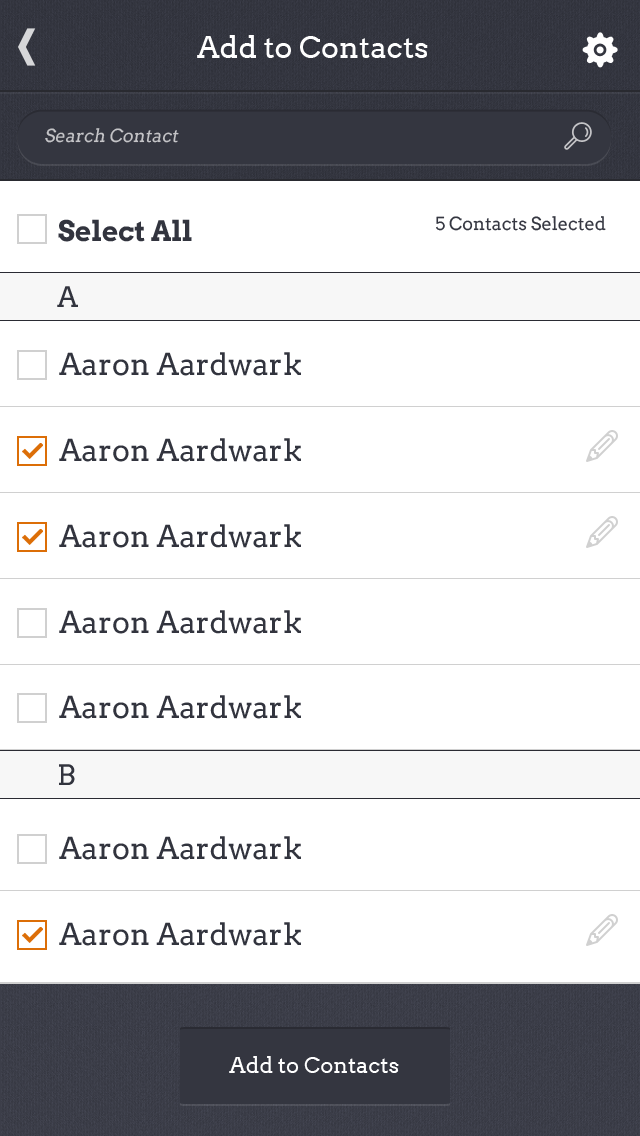
<style>
.page{position:relative;width:640px;height:1136px;background:#ffffff}
.page>*{position:absolute;margin:0}
.t1{font:30px "Arvo";color:#ffffff}
.t2{font:18px "Arvo";color:#c4c4c7;font-style:italic}
.t3{font:28px "Arvo-Bold";color:#32343e}
.t4{font:18px "Arvo";color:#353741}
.t5{font:28px "Arvo";color:#32343e}
.t6{font:30px "Arvo";color:#32343e}
.t7{font:22px "Arvo";color:#ffffff}
</style>
<div class="page">
<p class="t1" style="left:197px;top:35px;width:231px;height:23px">Add to Contacts</p>
<p class="t2" style="left:45px;top:128px;width:134px;height:15px">Search Contact</p>
<p class="t3" style="left:58px;top:219px;width:134px;height:23px">Select All</p>
<p class="t4" style="left:436px;top:216px;width:170px;height:15px">5 Contacts Selected</p>
<p class="t5" style="left:57px;top:286px;width:21px;height:21px">A</p>
<p class="t6" style="left:59px;top:352px;width:242px;height:24px">Aaron Aardwark</p>
<p class="t6" style="left:59px;top:438px;width:242px;height:24px">Aaron Aardwark</p>
<p class="t6" style="left:59px;top:524px;width:242px;height:24px">Aaron Aardwark</p>
<p class="t6" style="left:59px;top:610px;width:242px;height:24px">Aaron Aardwark</p>
<p class="t6" style="left:59px;top:695px;width:242px;height:24px">Aaron Aardwark</p>
<p class="t5" style="left:59px;top:764px;width:16px;height:21px">B</p>
<p class="t6" style="left:59px;top:836px;width:242px;height:24px">Aaron Aardwark</p>
<p class="t6" style="left:59px;top:922px;width:242px;height:24px">Aaron Aardwark</p>
<p class="t7" style="left:229px;top:1056px;width:170px;height:17px">Add to Contacts</p>
</div>
